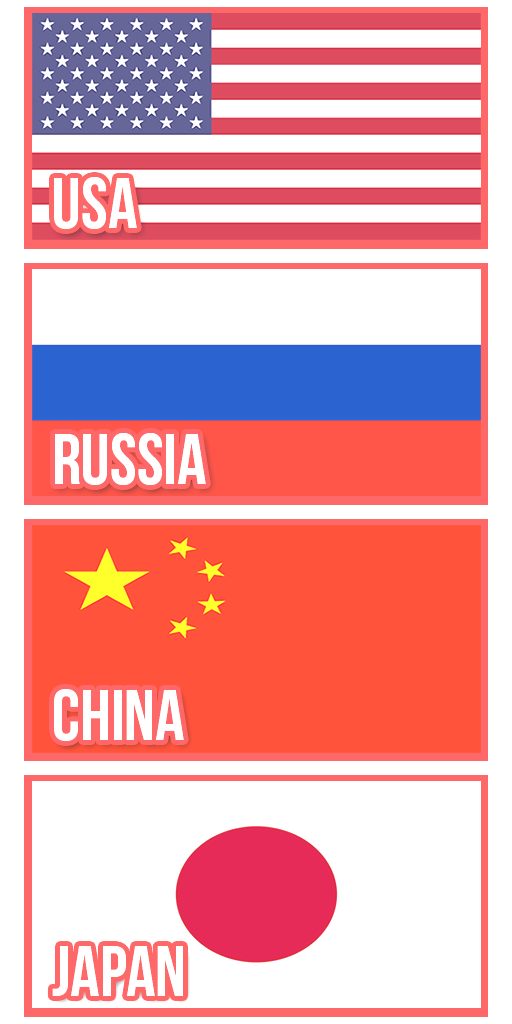
<style>
.page{position:relative;width:512px;height:1024px;background:#ffffff}
.page>*{position:absolute;margin:0}
.t1{font:72px "BebasNeue";color:#ffffff}
</style>
<div class="page">
<p class="t1" style="left:54px;top:177px;width:83px;height:52px">USA</p>
<p class="t1" style="left:55px;top:433px;width:151px;height:52px">Russia</p>
<p class="t1" style="left:54px;top:689px;width:130px;height:52px">China</p>
<p class="t1" style="left:52px;top:946px;width:131px;height:50px">Japan</p>
</div>
